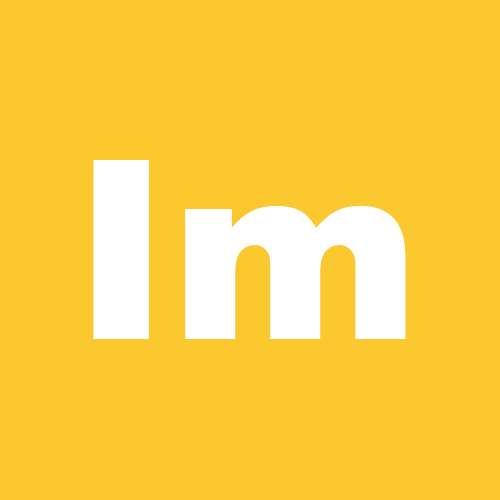
<style>
.page{position:relative;width:500px;height:500px;background:#fbc82f}
.page>*{position:absolute;margin:0}
.t1{font:250px "Arial-Black";color:#ffffff}
</style>
<div class="page">
<p class="t1" style="left:93px;top:160px;width:313px;height:179px">Im</p>
</div>
